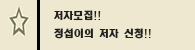
<style>
.page{position:relative;width:195px;height:50px;background:#eee8d0}
.page>*{position:absolute;margin:0}
.t1{font:10px "HeadlineR-HM";color:#1f1f1d}
</style>
<div class="page">
<p class="t1" style="left:54px;top:10px;width:47px;height:11px">저자모집!!</p>
<p class="t1" style="left:54px;top:28px;width:97px;height:11px">정섭이의 저자 신청!!</p>
</div>
